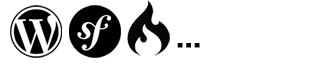
<style>
.page{position:relative;width:319px;height:70px;background:#ffffff}
.page>*{position:absolute;margin:0}
.t1{font:25.2px "HelveticaNeue-Bold";color:#000000;font-weight:bold}
</style>
<div class="page">
<p class="t1" style="left:177px;top:43px;width:23px;height:5px">…</p>
</div>
